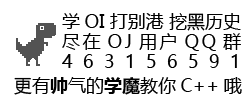
<style>
.page{position:relative;width:250px;height:100px;background:#ffffff}
.page>*{position:absolute;margin:0}
.t1{font:18px/20px "MicrosoftYaHeiUI";color:#000000}
.t2{font:18px/20px "MicrosoftYaHeiUI";letter-spacing:0.14em;color:#000000}
.t3{font:18px/20px "MicrosoftYaHeiUI";letter-spacing:0.58em;color:#000000}
.t4{font:18px "MicrosoftYaHeiUI";color:#000000}
.t5{font:18px "MicrosoftYaHeiUI-Bold";color:#000000}
</style>
<div class="page">
<p class="t1" style="left:62px;top:13px;width:179px;height:55px">学OI 打别港 挖黑历史<br><span class="t2">尽在OJ用户QQ群<br></span><span class="t3">463156591</span></p>
<p class="t4" style="left:14px;top:77px;width:228px;height:18px">更有<span class="t5">帅</span>气的<span class="t5">学魔</span>教你C++哦</p>
</div>
